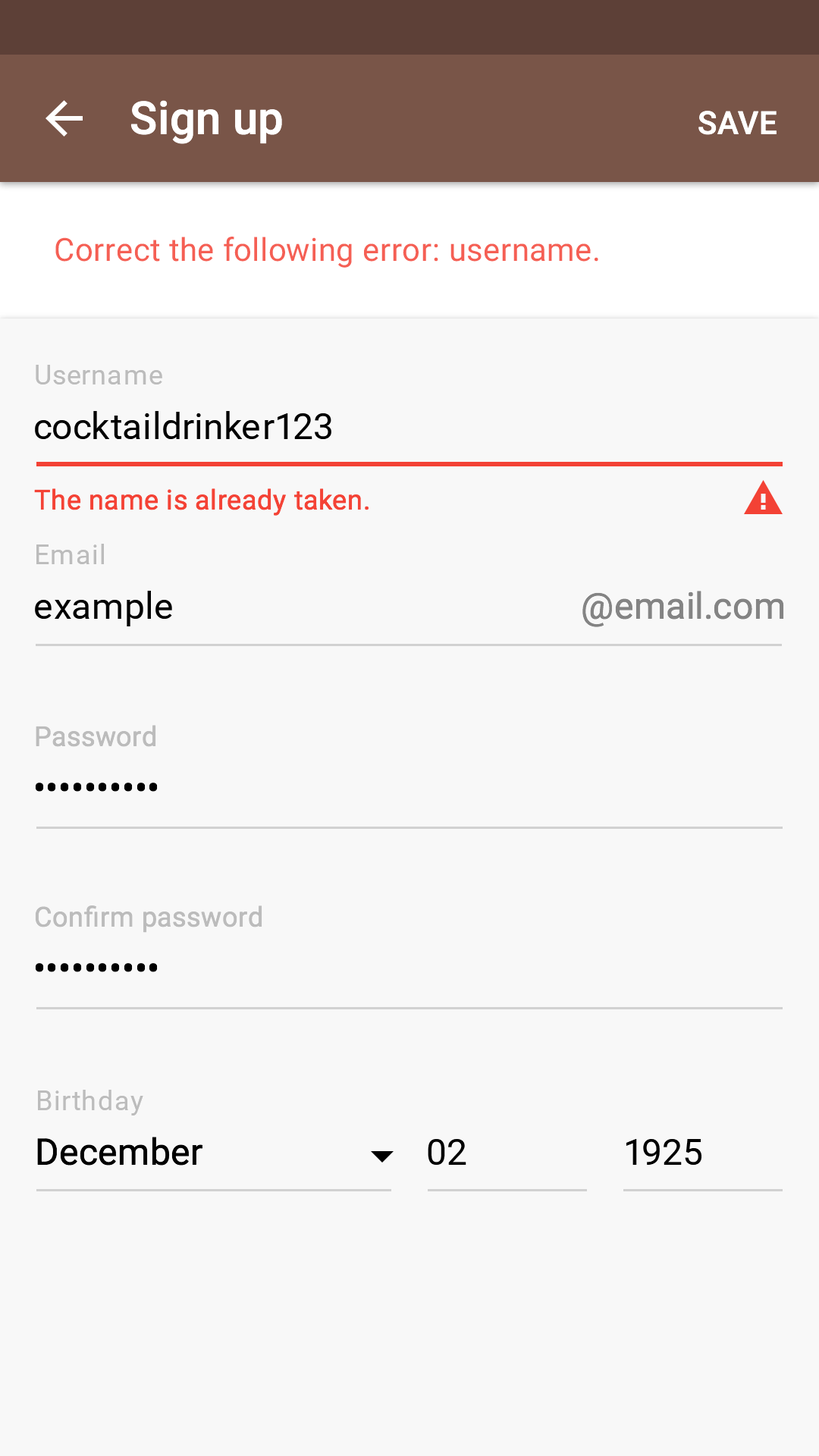
<style>
.page{position:relative;width:819px;height:1456px;background:#f8f8f8}
.page>*{position:absolute;margin:0}
.t1{font:45.5px "Roboto-Medium";letter-spacing:0.005em;color:#ffffff}
.t2{font:31.8px "Roboto-Medium";letter-spacing:0.01em;color:#ffffff;text-transform:uppercase}
.t3{font:31.8px "Roboto-Regular";letter-spacing:0.01em;color:#f55f54}
.t4{font:27.3px "Roboto-Regular";letter-spacing:0.02em;color:#bcbcbc}
.t5{font:36.4px "Roboto-Regular";letter-spacing:0.01em;color:#000000}
.t6{font:27.3px "Roboto-Regular";letter-spacing:0.02em;color:#f44336}
.t7{font:36.4px "Roboto-Regular";letter-spacing:0.01em;color:#848484}
</style>
<div class="page">
<p class="t1" style="left:130px;top:100px;width:152px;height:44px">Sign up</p>
<p class="t2" style="left:698px;top:111px;width:79px;height:24px">save</p>
<p class="t3" style="left:55px;top:237px;width:543px;height:31px">Correct the following error: username.</p>
<p class="t4" style="left:36px;top:365px;width:126px;height:19px">Username</p>
<p class="t5" style="left:35px;top:411px;width:296px;height:28px">cocktaildrinker123</p>
<p class="t6" style="left:34px;top:488px;width:335px;height:28px">The name is already taken.</p>
<p class="t4" style="left:36px;top:544px;width:68px;height:20px">Email</p>
<p class="t5" style="left:35px;top:591px;width:137px;height:35px">example</p>
<p class="t7" style="left:582px;top:591px;width:202px;height:36px">@email.com</p>
<p class="t4" style="left:36px;top:725px;width:120px;height:22px">Password</p>
<p class="t5" style="left:35px;top:783px;width:123px;height:9px">••••••••••</p>
<p class="t4" style="left:35px;top:905px;width:227px;height:28px">Confirm password</p>
<p class="t5" style="left:35px;top:963px;width:123px;height:9px">••••••••••</p>
<p class="t4" style="left:38px;top:1090px;width:105px;height:25px">Birthday</p>
<p class="t5" style="left:37px;top:1137px;width:165px;height:29px">December</p>
<p class="t5" style="left:428px;top:1139px;width:38px;height:26px">02</p>
<p class="t5" style="left:626px;top:1139px;width:75px;height:26px">1925</p>
</div>
